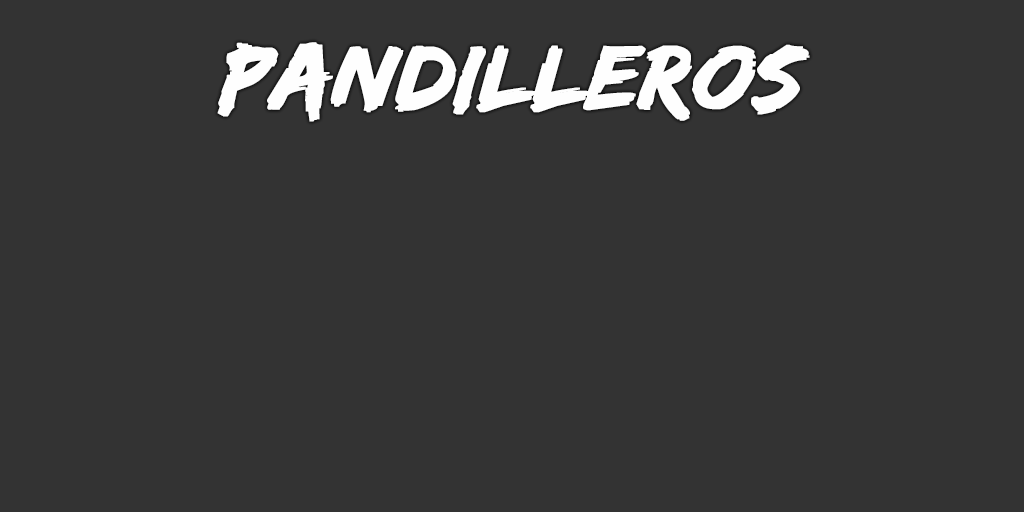
<style>
.page{position:relative;width:1024px;height:512px;background:#333333}
.page>*{position:absolute;margin:0}
.t1{font:94px "EdoSZ";color:#fefefe;font-weight:bold;font-style:italic;scale:1.04 1}
</style>
<div class="page">
<p class="t1" style="left:217px;top:42px;width:593px;height:80px">Pandilleros</p>
</div>
